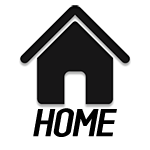
<style>
.page{position:relative;width:150px;height:150px;background:#ffffff}
.page>*{position:absolute;margin:0}
.t1{font:29.3px "KoreanYNMYT-B";color:#000000;font-style:italic}
</style>
<div class="page">
<p class="t1" style="left:33px;top:108px;width:84px;height:29px">HOME</p>
</div>
